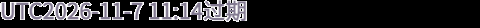
<style>
.page{position:relative;width:480px;height:28px;background:#000000}
.page>*{position:absolute;margin:0}
.t1{font:22px "WebPSD-18463539-0-Regular";color:#837a91;font-weight:bold}
</style>
<div class="page">
<p class="t1" style="left:0px;top:0px;width:480px;height:28px">UTC2026-11-7 11:14过期</p>
</div>
